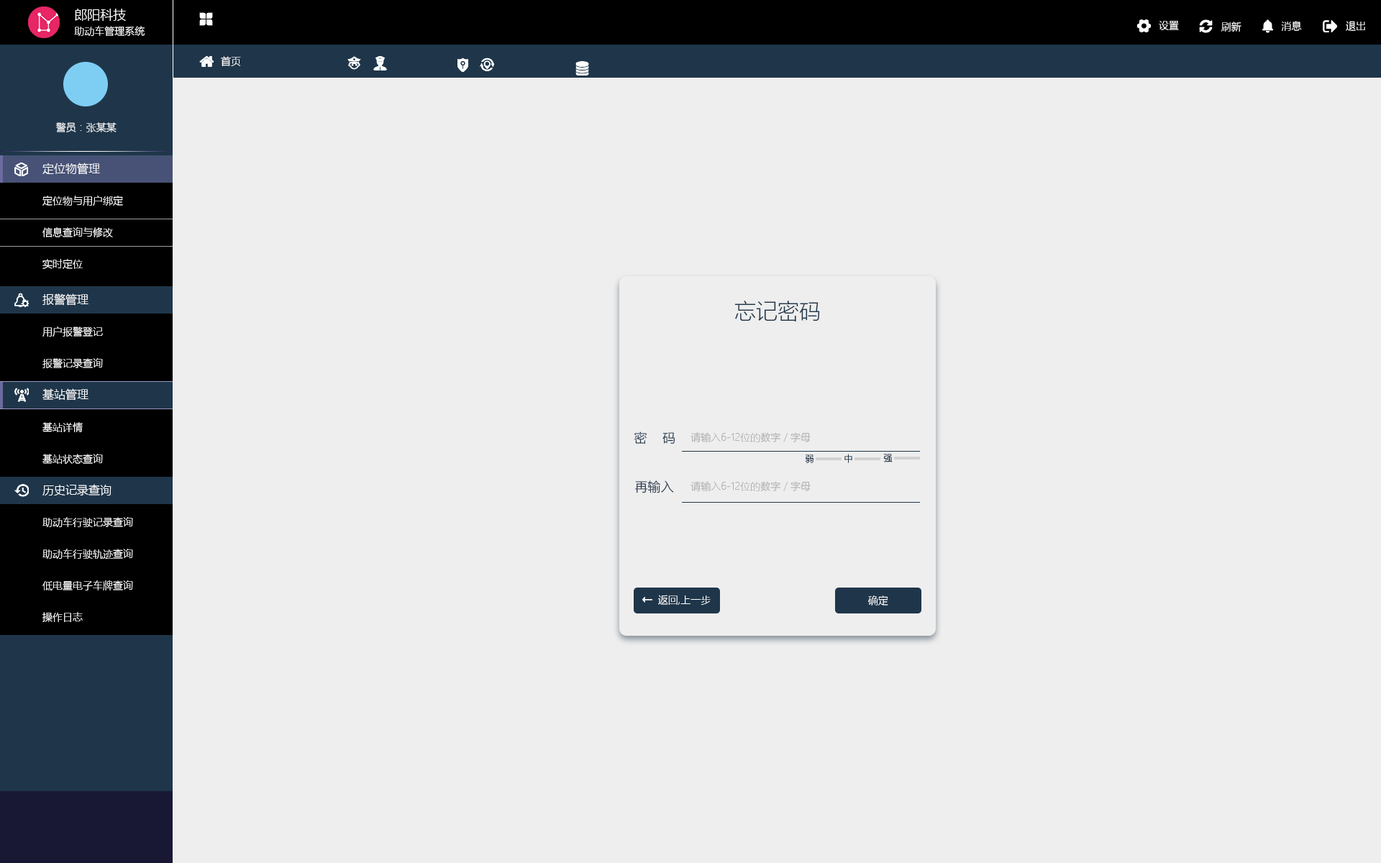
<style>
.page{position:relative;width:1381px;height:863px;background:#eeeeee}
.page>*{position:absolute;margin:0}
.t1{font:10.1px/17.3px "MicrosoftYaHeiLight";color:#ffffff}
.t2{font:12.9px/17.3px "MicrosoftYaHeiLight";color:#ffffff}
.t3{font:10.1px "MicrosoftYaHeiLight";color:#ffffff}
.t4{font:10.1px "MicrosoftYaHeiLight";color:#fffefe}
.t5{font:11.5px "MicrosoftYaHeiLight";color:#ffffff}
.t6{font:21.6px "MicrosoftYaHeiLight";color:#1f364a}
.t7{font:12.7px "MicrosoftYaHeiLight";color:#1f364a}
.t8{font:10.1px "MicrosoftYaHeiLight";color:#b1b0b0}
.t9{font:9px "MicrosoftYaHeiLight";color:#1f364a;scale:0.96 1}
.t10{font:12.8px "MicrosoftYaHeiLight";color:#1f364a}
.t11{font:12.9px "MicrosoftYaHeiLight";color:#ffffff;font-weight:bold}
</style>
<div class="page">
<p class="t1" style="left:74px;top:9px;width:71px;height:27px"><span class="t2">郎阳科技<br></span>助动车管理系统</p>
<p class="t3" style="left:1159px;top:21px;width:20px;height:9px">设置</p>
<p class="t3" style="left:1221px;top:22px;width:21px;height:10px">刷新</p>
<p class="t3" style="left:1281px;top:21px;width:21px;height:10px">消息</p>
<p class="t3" style="left:1346px;top:21px;width:19px;height:10px">退出</p>
<p class="t4" style="left:221px;top:56px;width:20px;height:10px">首页</p>
<p class="t3" style="left:56px;top:122px;width:61px;height:10px">警员：张某某</p>
<p class="t5" style="left:42px;top:163px;width:58px;height:12px">定位物管理</p>
<p class="t3" style="left:42px;top:196px;width:81px;height:10px">定位物与用户绑定</p>
<p class="t3" style="left:42px;top:227px;width:71px;height:10px">信息查询与修改</p>
<p class="t3" style="left:42px;top:259px;width:41px;height:10px">实时定位</p>
<p class="t5" style="left:42px;top:294px;width:46px;height:12px">报警管理</p>
<p class="t6" style="left:735px;top:301px;width:85px;height:21px">忘记密码</p>
<p class="t3" style="left:42px;top:327px;width:61px;height:10px">用户报警登记</p>
<p class="t3" style="left:42px;top:358px;width:61px;height:10px">报警记录查询</p>
<p class="t5" style="left:42px;top:388px;width:46px;height:13px">基站管理</p>
<p class="t3" style="left:42px;top:422px;width:41px;height:10px">基站详情</p>
<p class="t7" style="left:635px;top:432px;width:40px;height:13px">密    码</p>
<p class="t8" style="left:691px;top:432px;width:120px;height:10px">请输入6-12位的数字 / 字母</p>
<p class="t3" style="left:42px;top:454px;width:61px;height:10px">基站状态查询</p>
<p class="t9" style="left:805px;top:455px;width:9px;height:8px">弱</p>
<p class="t9" style="left:845px;top:454px;width:7px;height:9px">中</p>
<p class="t9" style="left:883px;top:454px;width:10px;height:9px">强</p>
<p class="t5" style="left:42px;top:484px;width:70px;height:12px">历史记录查询</p>
<p class="t10" style="left:635px;top:481px;width:39px;height:13px">再输入</p>
<p class="t8" style="left:691px;top:481px;width:120px;height:10px">请输入6-12位的数字 / 字母</p>
<p class="t3" style="left:42px;top:517px;width:91px;height:10px">助动车行驶记录查询</p>
<p class="t3" style="left:42px;top:549px;width:91px;height:10px">助动车行驶轨迹查询</p>
<p class="t3" style="left:42px;top:581px;width:91px;height:10px">低电量电子车牌查询</p>
<p class="t3" style="left:642px;top:595px;width:69px;height:10px"><span class="t11">← </span>返回,上一步</p>
<p class="t3" style="left:868px;top:596px;width:20px;height:10px">确定</p>
<p class="t3" style="left:42px;top:612px;width:41px;height:10px">操作日志</p>
</div>
